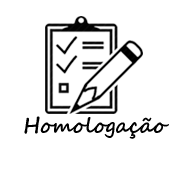
<style>
.page{position:relative;width:191px;height:169px;background:#ffffff}
.page>*{position:absolute;margin:0}
.t1{font:21px "SegoeScript-Bold";color:#000000}
</style>
<div class="page">
<p class="t1" style="left:24px;top:116px;width:145px;height:23px">Homologação</p>
</div>
